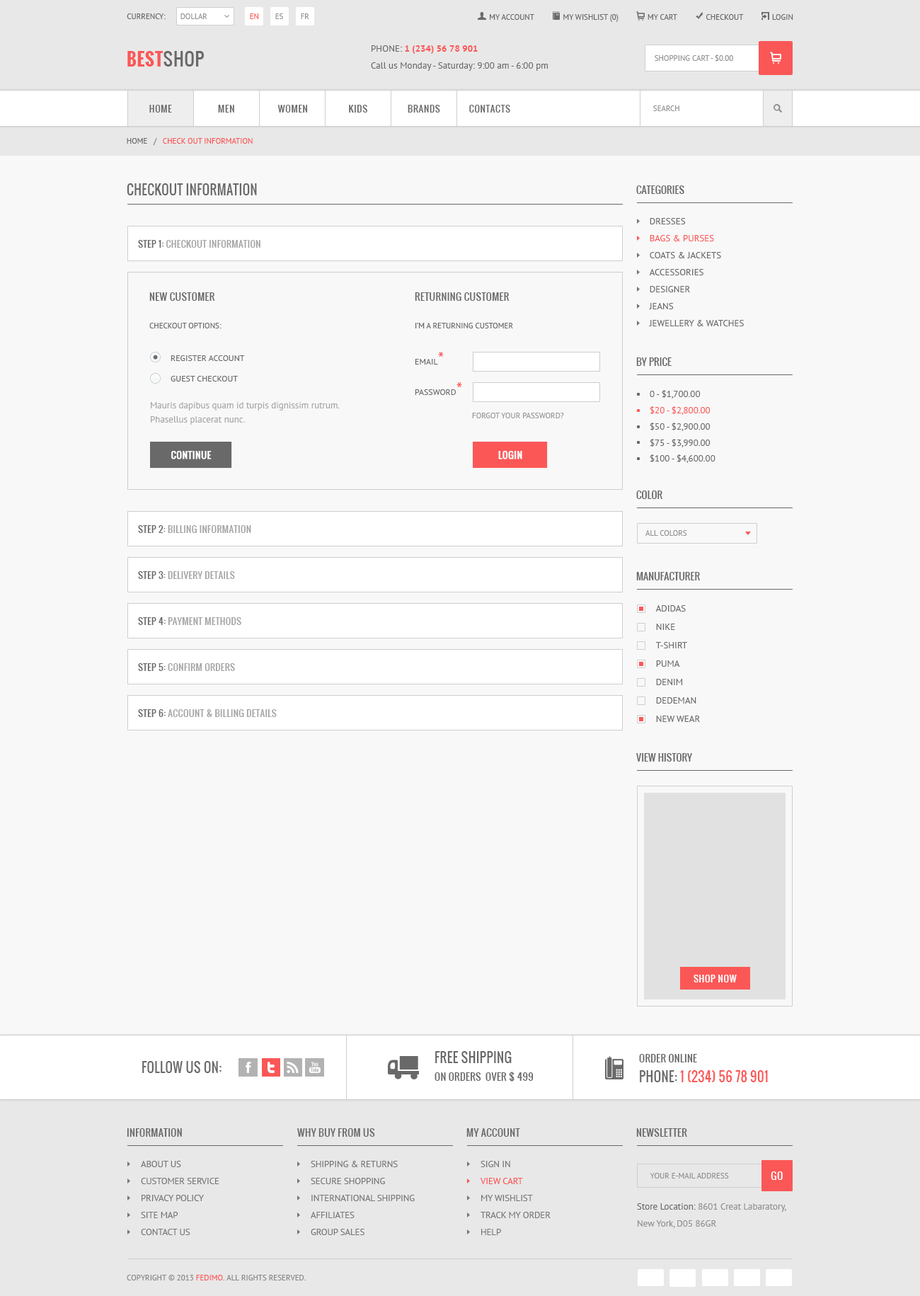
<style>
.page{position:relative;width:920px;height:1296px;background:#f8f8f8}
.page>*{position:absolute;margin:0}
.t1{font:7.8px "PTSans-Regular";color:#696969;text-transform:uppercase}
.t2{font:7.8px "PTSans-Regular";color:#939393;text-transform:uppercase}
.t3{font:7.8px "PTSans-Regular";color:#fb5757;text-transform:uppercase}
.t4{font:17.7px "Oswald-Bold";letter-spacing:0.025em;color:#fb5757;text-transform:uppercase}
.t5{font:17.7px "Oswald-Regular";letter-spacing:0.025em;color:#696969;text-transform:uppercase}
.t6{font:9.2px/17px "PTSans-Regular";color:#696969}
.t7{font:9.2px/17px "PTSans-Regular";color:#696969;text-transform:uppercase}
.t8{font:9.2px/17px "PTSans-Bold";color:#fb5757;text-transform:uppercase}
.t9{font:9.2px "Oswald-Regular";letter-spacing:0.05em;color:#696969;text-transform:uppercase}
.t10{font:12.7px "Oswald-Regular";letter-spacing:0.015em;color:#696969;text-transform:uppercase}
.t11{font:9.9px "Oswald-Regular";letter-spacing:0.015em;color:#696969;text-transform:uppercase}
.t12{font:9.2px/17px "PTSans-Regular";color:#fb5757;text-transform:uppercase}
.t13{font:9.2px "Oswald-Regular";letter-spacing:0.025em;color:#a5a5a5;text-transform:uppercase}
.t14{font:9.2px "Oswald-Regular";letter-spacing:0.025em;color:#696969;text-transform:uppercase}
.t15{font:9.9px "Oswald-Regular";letter-spacing:0.025em;color:#696969;text-transform:uppercase}
.t16{font:8.5px "PTSans-Regular";color:#696969;text-transform:uppercase}
.t17{font:18.4px "PTSans-Regular";color:#fb5757;text-transform:uppercase}
.t18{font:9.2px/16.2px "PTSans-Regular";color:#696969;text-transform:uppercase}
.t19{font:9.2px/16.2px "PTSans-Regular";color:#fb5757;text-transform:uppercase}
.t20{font:9.2px/14.2px "PTSans-Regular";color:#a5a5a5}
.t21{font:7.8px "PTSans-Regular";color:#9a9a9a;text-transform:uppercase}
.t22{font:9.2px "Oswald-Regular";letter-spacing:0.025em;color:#ffffff;text-transform:uppercase;font-weight:bold}
.t23{font:9.2px/18.4px "PTSans-Regular";color:#696969;text-transform:uppercase}
.t24{font:9.2px "Oswald-Regular";letter-spacing:0.05em;color:#ffffff;text-transform:uppercase}
.t25{font:9.9px/17.7px "Oswald-Regular";letter-spacing:0.015em;color:#696969;text-transform:uppercase}
.t26{font:12.7px/19.8px "Oswald-Regular";letter-spacing:0.015em;color:#fb5757;text-transform:uppercase}
.t27{font:12.7px/19.8px "Oswald-Regular";letter-spacing:0.015em;color:#696969;text-transform:uppercase}
.t28{font:9.2px/17px "PTSans-Regular";color:#767676;text-transform:uppercase}
.t29{font:9.9px "Oswald-Regular";letter-spacing:0.05em;color:#ffffff;text-transform:uppercase}
.t30{font:9.2px/17px "PTSans-Regular";color:#8f8f8f}
.t31{font:7.8px "PTSans-Regular";color:#888888;text-transform:uppercase}
</style>
<div class="page">
<p class="t1" style="left:127px;top:13px;width:39px;height:6px">Currency:</p>
<p class="t2" style="left:180px;top:13px;width:27px;height:6px">Dollar</p>
<p class="t3" style="left:250px;top:13px;width:9px;height:6px">En</p>
<p class="t2" style="left:275px;top:13px;width:8px;height:6px">Es</p>
<p class="t2" style="left:301px;top:13px;width:8px;height:6px">Fr</p>
<p class="t1" style="left:490px;top:14px;width:303px;height:8px">My Account              My Wishlist (0)              My Cart              Checkout              Login</p>
<p class="t4" style="left:127px;top:51px;width:77px;height:16px">Best<span class="t5">Shop</span></p>
<p class="t6" style="left:371px;top:45px;width:177px;height:26px"><span class="t7">Phone: </span><span class="t8">1 (234) 56 78 901<br></span>Call us Monday - Saturday: 9:00 am - 6:00 pm</p>
<p class="t2" style="left:655px;top:54px;width:78px;height:8px">Shopping Cart - $0.00</p>
<p class="t9" style="left:149px;top:105px;width:23px;height:8px">Home</p>
<p class="t9" style="left:218px;top:105px;width:16px;height:8px">Men</p>
<p class="t9" style="left:277px;top:105px;width:31px;height:8px">Women</p>
<p class="t9" style="left:349px;top:105px;width:18px;height:8px">Kids</p>
<p class="t9" style="left:408px;top:105px;width:32px;height:8px">Brands</p>
<p class="t9" style="left:469px;top:105px;width:41px;height:8px">Contacts</p>
<p class="t2" style="left:653px;top:105px;width:26px;height:6px">Search</p>
<p class="t3" style="left:127px;top:138px;width:126px;height:7px"><span class="t1">Home   /   </span>Check out Information</p>
<p class="t10" style="left:127px;top:183px;width:130px;height:12px">Checkout Information</p>
<p class="t11" style="left:636px;top:185px;width:48px;height:9px">Categories</p>
<p class="t7" style="left:649px;top:218px;width:95px;height:108px">Dresses<br><span class="t12">Bags &amp; Purses<br></span>Coats &amp; Jackets<br>Accessories<br>Designer<br>Jeans<br>Jewellery &amp; Watches</p>
<p class="t13" style="left:138px;top:240px;width:122px;height:8px"><span class="t14">Step 1: </span>Checkout Information</p>
<p class="t15" style="left:149px;top:292px;width:66px;height:9px">New Customer</p>
<p class="t15" style="left:415px;top:292px;width:95px;height:9px">Returning Customer</p>
<p class="t1" style="left:149px;top:323px;width:73px;height:5px">Checkout Options:</p>
<p class="t1" style="left:415px;top:323px;width:98px;height:5px">I’m a Returning Customer</p>
<p class="t16" style="left:415px;top:352px;width:29px;height:13px">Email<span class="t17">*</span></p>
<p class="t16" style="left:171px;top:355px;width:74px;height:6px">Register Account</p>
<p class="t11" style="left:636px;top:357px;width:36px;height:9px">By Price</p>
<p class="t16" style="left:171px;top:376px;width:67px;height:5px">Guest Checkout</p>
<p class="t16" style="left:415px;top:382px;width:47px;height:13px">Password<span class="t17">*</span></p>
<p class="t18" style="left:650px;top:390px;width:66px;height:73px">0 - $1,700.00<br><span class="t19">$20 - $2,800.00<br></span>$50 - $2,900.00<br>$75 - $3,990.00<br>$100 - $4,600.00</p>
<p class="t20" style="left:151px;top:402px;width:189px;height:23px">Mauris dapibus quam id turpis dignissim rutrum. <br>Phasellus placerat nunc.</p>
<p class="t21" style="left:472px;top:413px;width:92px;height:5px">Forgot your password?</p>
<p class="t22" style="left:171px;top:451px;width:41px;height:8px">Continue</p>
<p class="t22" style="left:498px;top:451px;width:24px;height:8px">Login</p>
<p class="t11" style="left:636px;top:490px;width:26px;height:9px">Color</p>
<p class="t13" style="left:138px;top:525px;width:113px;height:8px"><span class="t14">Step 2: </span>Billing Information</p>
<p class="t2" style="left:645px;top:530px;width:42px;height:6px">All Colors</p>
<p class="t13" style="left:138px;top:571px;width:97px;height:8px"><span class="t14">Step 3: </span>Delivery Details</p>
<p class="t11" style="left:636px;top:572px;width:64px;height:8px">Manufacturer</p>
<p class="t23" style="left:655px;top:605px;width:45px;height:117px">Adidas<br>Nike<br>T-shirt<br>Puma<br>Denim<br>Dedeman<br>New Wear</p>
<p class="t13" style="left:138px;top:617px;width:103px;height:8px"><span class="t14">Step 4: </span>Payment Methods</p>
<p class="t13" style="left:138px;top:663px;width:97px;height:8px"><span class="t14">Step 5: </span>Confirm Orders</p>
<p class="t13" style="left:138px;top:709px;width:139px;height:8px"><span class="t14">Step 6: </span>Account &amp; Billing Details</p>
<p class="t11" style="left:636px;top:753px;width:56px;height:9px">View History</p>
<p class="t24" style="left:694px;top:975px;width:43px;height:7px">Shop Now</p>
<p class="t10" style="left:142px;top:1061px;width:80px;height:12px">Follow Us On:</p>
<p class="t25" style="left:435px;top:1051px;width:99px;height:30px"><span class="t10">Free Shipping<br></span>On Orders  Over $ 499</p>
<p class="t26" style="left:639px;top:1054px;width:129px;height:28px"><span class="t11">Order Online<br></span><span class="t27">Phone: </span>1 (234) 56 78 901</p>
<p class="t11" style="left:127px;top:1128px;width:55px;height:9px">Information</p>
<p class="t11" style="left:297px;top:1128px;width:78px;height:9px">Why Buy From Us</p>
<p class="t11" style="left:466px;top:1128px;width:54px;height:9px">My Account</p>
<p class="t11" style="left:636px;top:1128px;width:51px;height:9px">Newsletter</p>
<p class="t28" style="left:141px;top:1161px;width:78px;height:74px">About Us<br>Customer Service<br>Privacy Policy<br>Site Map<br>Contact Us</p>
<p class="t28" style="left:311px;top:1161px;width:104px;height:74px">Shipping &amp; Returns<br>Secure Shopping<br>International Shipping<br>Affiliates<br>Group Sales</p>
<p class="t28" style="left:480px;top:1161px;width:71px;height:74px">Sign In<br><span class="t12">View Cart<br></span>My Wishlist<br>Track My Order<br>Help</p>
<p class="t2" style="left:650px;top:1173px;width:79px;height:5px">Your E-mail address</p>
<p class="t29" style="left:771px;top:1171px;width:12px;height:9px">Go</p>
<p class="t30" style="left:637px;top:1203px;width:149px;height:25px"><span class="t6">Store Location:</span> 8601 Creat Labaratory, <br>New York, D05 86GR</p>
<p class="t31" style="left:127px;top:1275px;width:179px;height:5px">Copyright © 2013 <span class="t3">Fedimo</span>. All rights reserved.</p>
</div>
